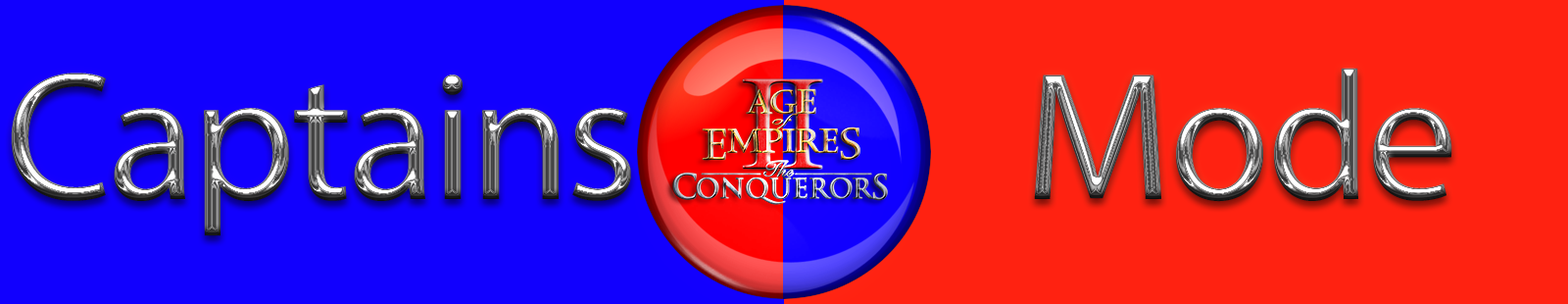
<style>
.page{position:relative;width:1568px;height:304px;background:#ff2211}
.page>*{position:absolute;margin:0}
.t1{font:184px "MyriadPro-Regular"}
</style>
<div class="page">
<p class="t1" style="left:11px;top:73px;width:620px;height:163px">Captains</p>
<p class="t1" style="left:1034px;top:68px;width:418px;height:134px">Mode</p>
</div>
